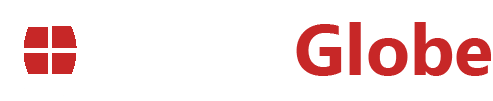
<style>
.page{position:relative;width:493px;height:101px;background:#ffffff}
.page>*{position:absolute;margin:0}
.t1{font:72px "Ebrima-Bold";color:#c72727}
.t2{font:72px "Ebrima-Bold";color:#ffffff}
</style>
<div class="page">
<p class="t1" style="left:114px;top:22px;width:377px;height:54px"><span class="t2">News</span>Globe</p>
</div>
